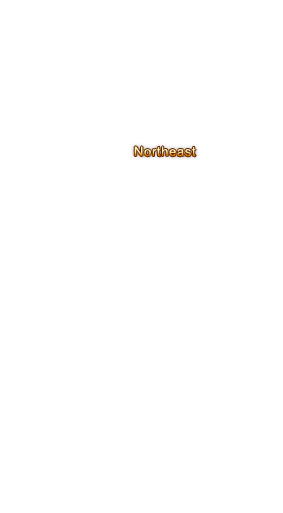
<style>
.page{position:relative;width:283px;height:513px;background:#ffffff}
.page>*{position:absolute;margin:0}
.t1{font:13px "ArialMT";letter-spacing:0.05em}
</style>
<div class="page">
<p class="t1" style="left:134px;top:146px;width:62px;height:11px">Northeast</p>
</div>
